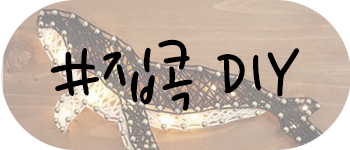
<style>
.page{position:relative;width:350px;height:150px}
.page>*{position:absolute;margin:0}
.t1{font:83.9px "NanumPen";color:#000000}
</style>
<div class="page">
<p class="t1" style="left:50px;top:39px;width:249px;height:72px">#집콕 DIY</p>
</div>
